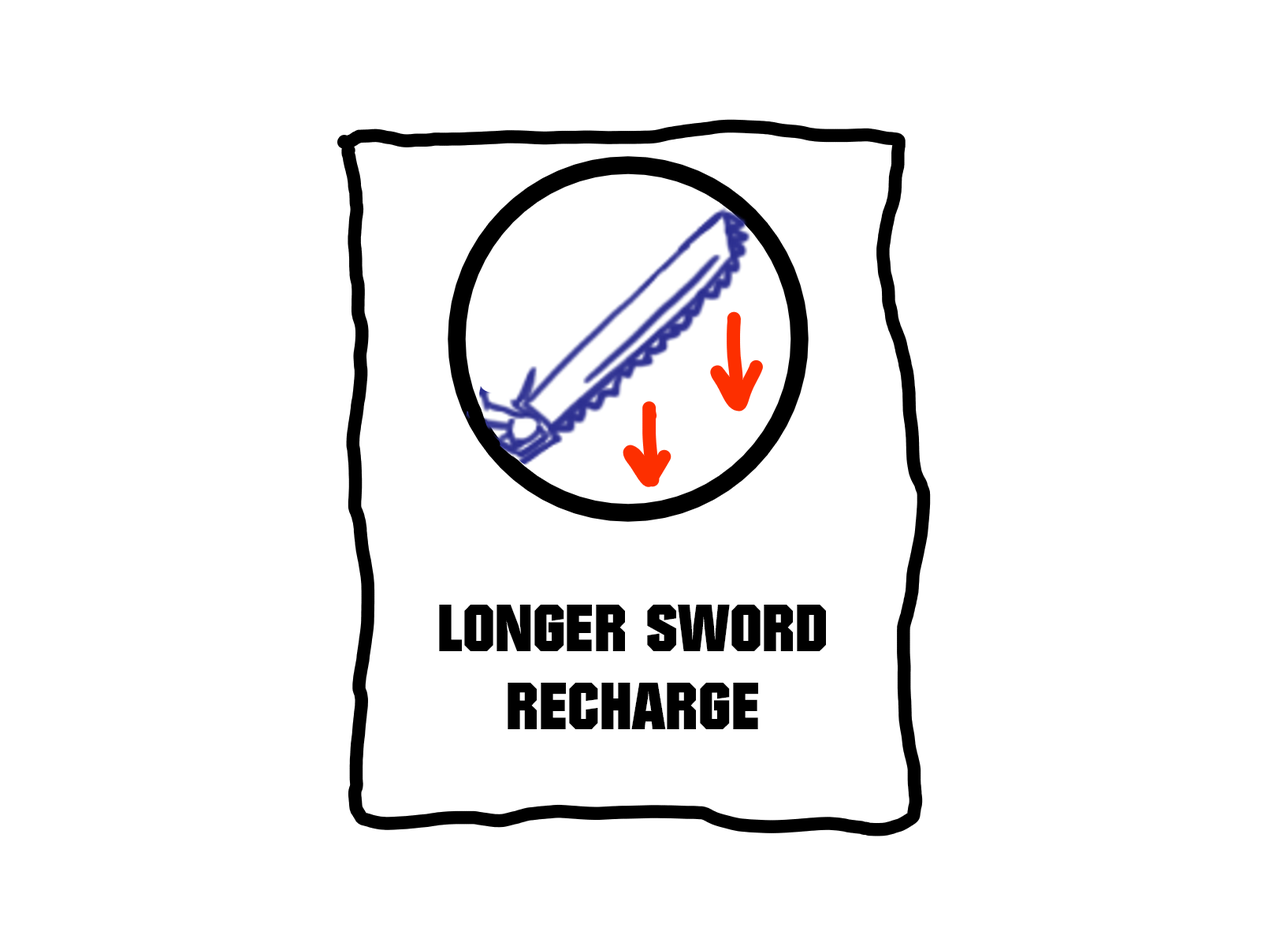
<style>
.page{position:relative;width:1261px;height:946px;background:#ffffff}
.page>*{position:absolute;margin:0}
.t1{font:64.6px "Autumn";color:#000000;text-transform:uppercase}
</style>
<div class="page">
<p class="t1" style="left:439px;top:604px;width:387px;height:125px;text-align:center">LONGER SWORD<br>RECHARGE</p>
</div>
